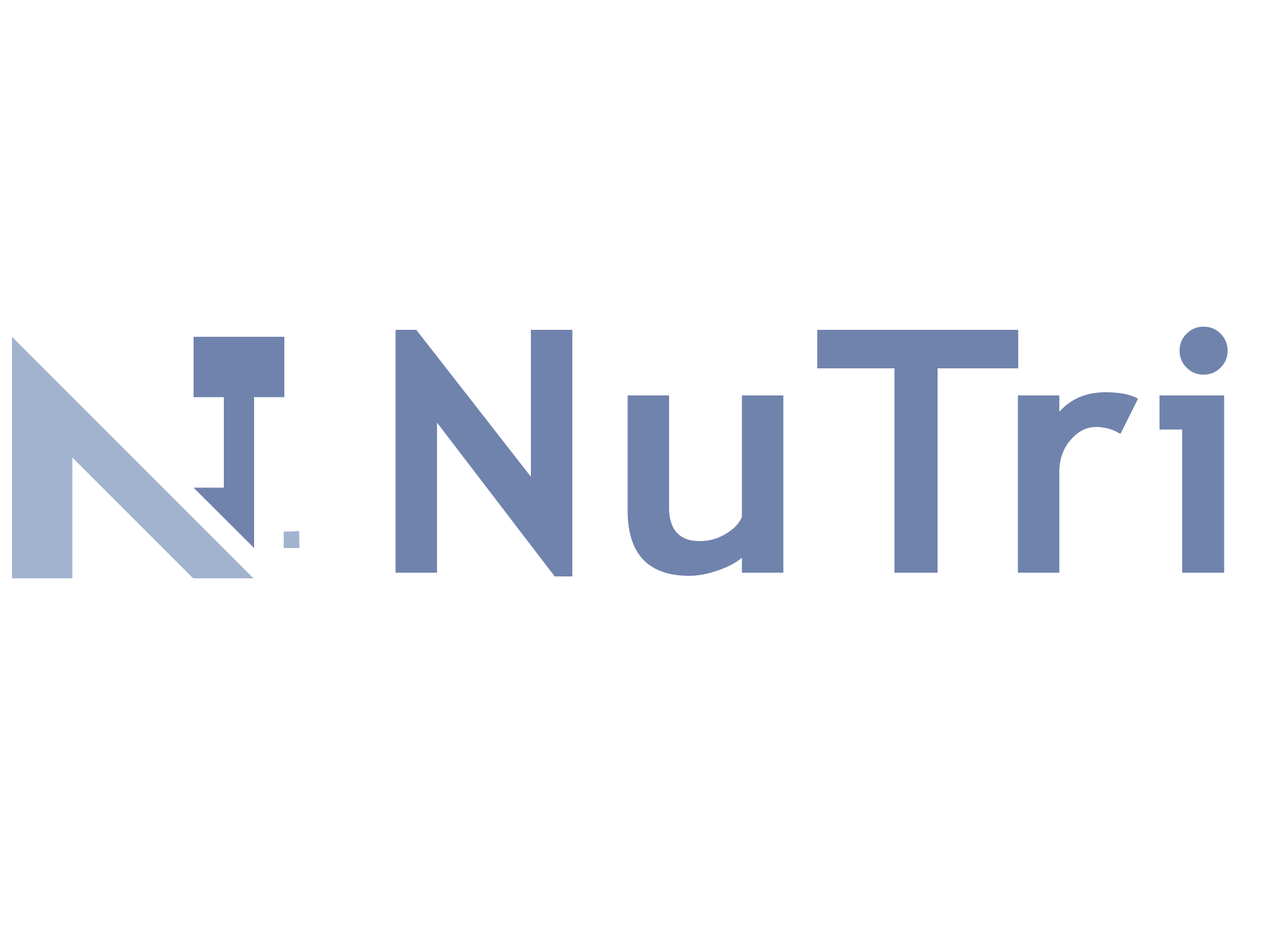
<style>
.page{position:relative;width:1261px;height:946px;background:#ffffff}
.page>*{position:absolute;margin:0}
.t1{font:338.9px "TrebuchetMS-Bold";letter-spacing:0.025em;color:#7083ad}
</style>
<div class="page">
<p class="t1" style="left:395px;top:327px;width:833px;height:249px">NuTri</p>
</div>
